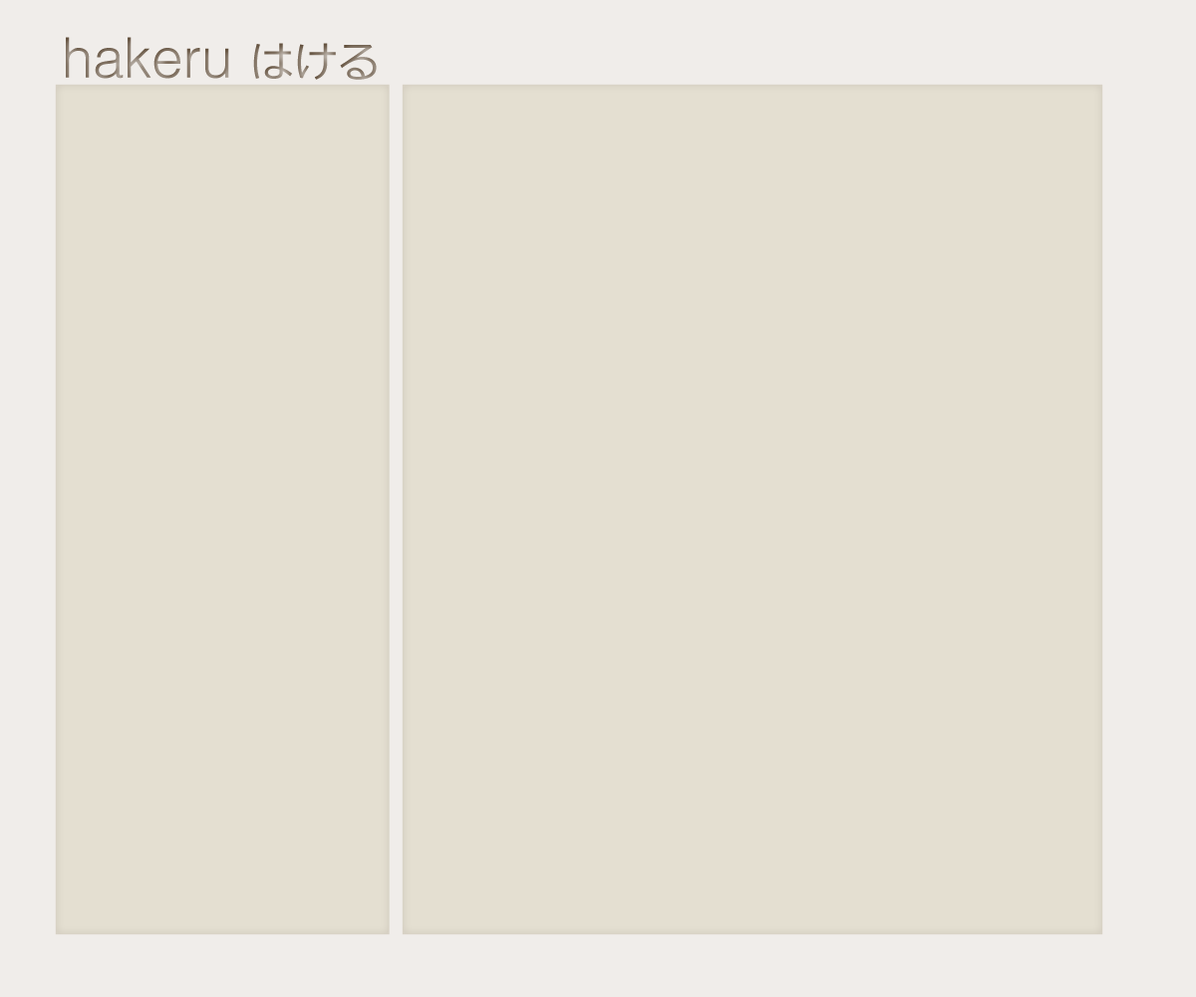
<style>
.page{position:relative;width:1196px;height:997px;background:#e4dfd1}
.page>*{position:absolute;margin:0}
.t1{font:55.8px "HelveticaLT-Light"}
.t2{font:43.9px "Meiryo"}
</style>
<div class="page">
<p class="t1" style="left:66px;top:37px;width:311px;height:43px">hakeru <span class="t2">はける</span></p>
</div>
